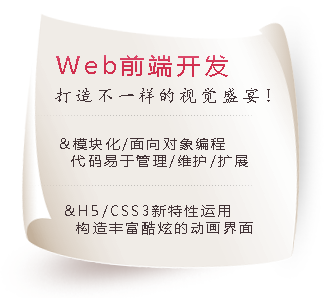
<style>
.page{position:relative;width:324px;height:298px;background:#f0ece7}
.page>*{position:absolute;margin:0}
.t1{font:18px "¿¬Ìå";letter-spacing:0.16em;color:#413235}
.t2{font:14px "MicrosoftYaHei";letter-spacing:0.16em;color:#413235}
</style>
<div class="page">
<p class="t1" style="left:55px;top:88px;width:215px;height:16px">打造不一样的视觉盛宴！</p>
<p class="t2" style="left:60px;top:138px;width:188px;height:30px">&amp;模块化/面向对象编程<br>  代码易于管理/维护/扩展</p>
<p class="t2" style="left:65px;top:205px;width:188px;height:30px">&amp;H5/CSS3新特性运用<br>  构造丰富酷炫的动画界面</p>
</div>
